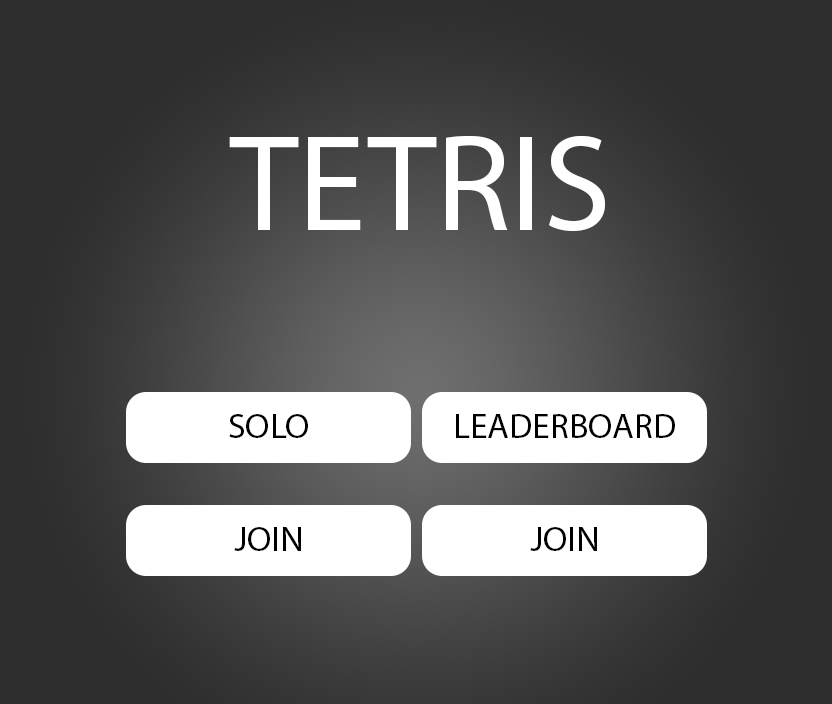
<style>
.page{position:relative;width:832px;height:704px;background:#2e2e2e}
.page>*{position:absolute;margin:0}
.t1{font:137.6px "MyriadPro-Regular";color:#ffffff}
.t2{font:35.4px "MyriadPro-Regular";color:#000000}
</style>
<div class="page">
<p class="t1" style="left:229px;top:135px;width:376px;height:97px">TETRIS</p>
<p class="t2" style="left:229px;top:414px;width:79px;height:24px">SOLO</p>
<p class="t2" style="left:456px;top:414px;width:219px;height:24px">LEADERBOARD</p>
<p class="t2" style="left:234px;top:527px;width:67px;height:24px">JOIN</p>
<p class="t2" style="left:530px;top:527px;width:67px;height:24px">JOIN</p>
</div>
